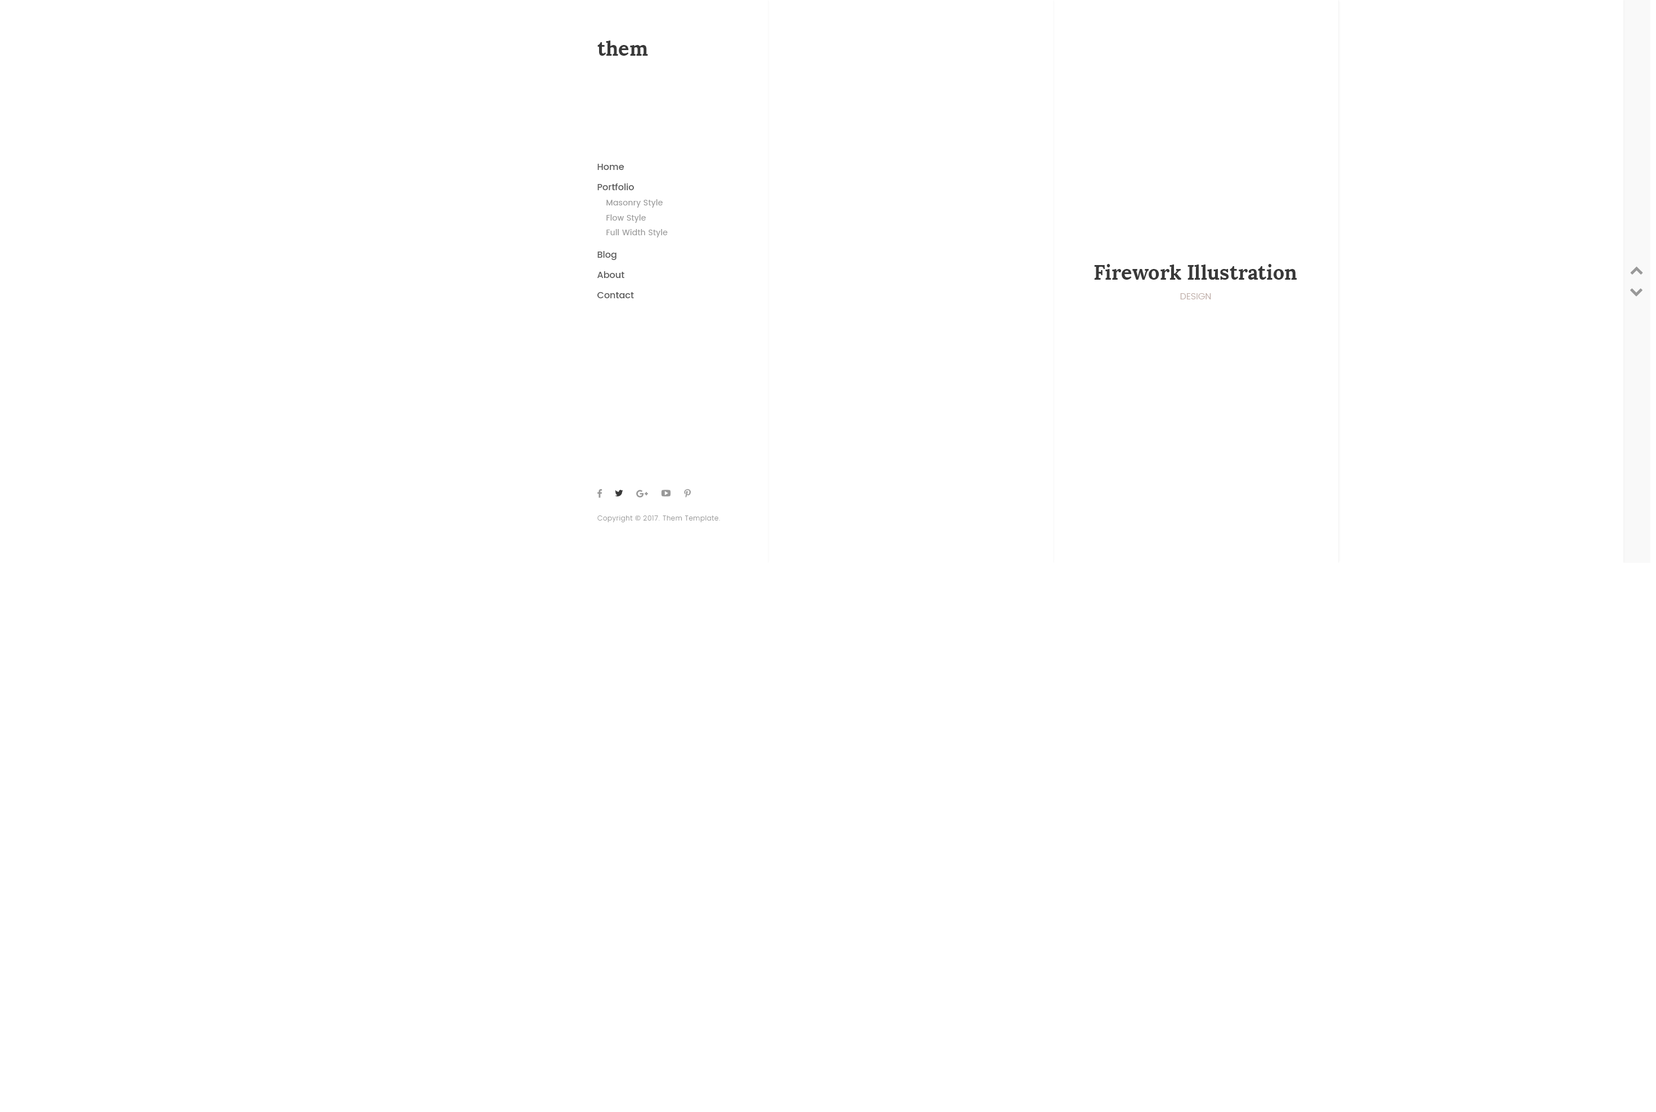
<style>
.page{position:relative;width:1656px;height:1112px;background:#ffffff}
.page>*{position:absolute;margin:0}
.t1{font:20.2px "Lora-Bold";color:#393939}
.t2{font:9px "Poppins-Medium";color:#595959}
.t3{font:7.9px "Poppins-Regular";letter-spacing:0.025em;color:#999999}
.t4{font:9px "Poppins-Light";letter-spacing:0.01em;color:#bcaaa4;text-transform:uppercase}
.t5{font:6.8px "Poppins-Light";letter-spacing:0.05em;color:#999999}
.t6{font:6.8px "OpenSans";letter-spacing:0.05em;color:#999999}
</style>
<div class="page">
<p class="t1" style="left:597px;top:40px;width:51px;height:16px">them</p>
<p class="t2" style="left:597px;top:164px;width:27px;height:6px">Home</p>
<p class="t2" style="left:597px;top:183px;width:37px;height:7px">Portfolio</p>
<p class="t3" style="left:606px;top:199px;width:57px;height:9px">Masonry Style</p>
<p class="t3" style="left:606px;top:214px;width:40px;height:9px">Flow Style</p>
<p class="t3" style="left:606px;top:229px;width:62px;height:8px">Full Width Style</p>
<p class="t2" style="left:597px;top:251px;width:19px;height:9px">Blog</p>
<p class="t1" style="left:1094px;top:264px;width:203px;height:16px">Firework Illustration</p>
<p class="t2" style="left:597px;top:271px;width:27px;height:7px">About</p>
<p class="t2" style="left:597px;top:292px;width:37px;height:6px">Contact</p>
<p class="t4" style="left:1180px;top:293px;width:31px;height:6px">Design</p>
<p class="t5" style="left:597px;top:515px;width:123px;height:7px">Copyright <span class="t6">© </span>2017. Them Template.</p>
</div>
